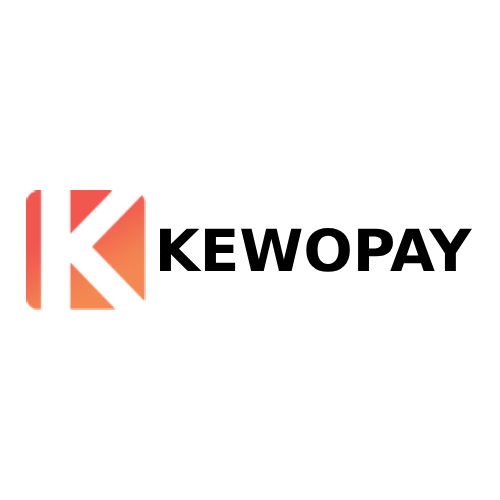
<style>
.page{position:relative;width:500px;height:500px;background:#ffffff}
.page>*{position:absolute;margin:0}
.t1{font:58.1px "DejaVuSans-Bold";color:#000000}
</style>
<div class="page">
<p class="t1" style="left:160px;top:228px;width:312px;height:44px">KEWOPAY</p>
</div>
